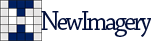
<style>
.page{position:relative;width:151px;height:41px;background:#ffffff}
.page>*{position:absolute;margin:0}
.t1{font:28px "ChaparralPro-Regular";letter-spacing:-0.1em;color:#030f3a;scale:0.93 1}
</style>
<div class="page">
<p class="t1" style="left:41px;top:11px;width:111px;height:26px">NewImagery</p>
</div>
